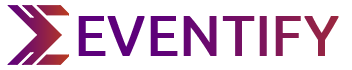
<style>
.page{position:relative;width:352px;height:70px;background:#ffffff}
.page>*{position:absolute;margin:0}
.t1{font:56px "Ubuntu-Regular";color:#5d007b;font-weight:bold}
</style>
<div class="page">
<p class="t1" style="left:78px;top:16px;width:261px;height:40px">EVENTIFY</p>
</div>
